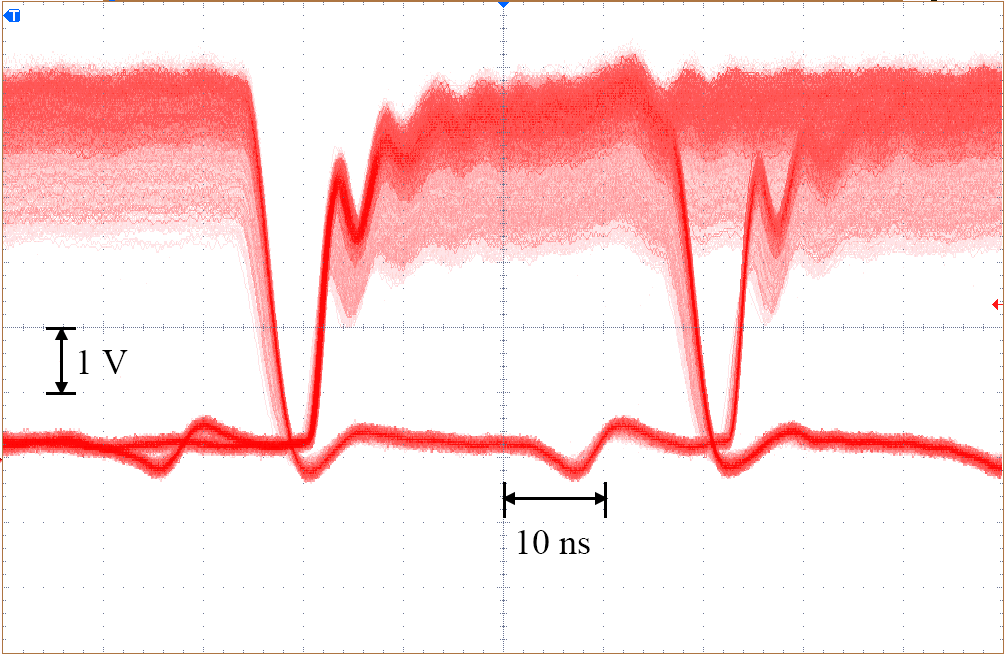
<style>
.page{position:relative;width:1005px;height:655px;background:#ffffff}
.page>*{position:absolute;margin:0}
.t1{font:36px "TimesNewRomanPSMT";color:#000000}
</style>
<div class="page">
<p class="t1" style="left:79px;top:350px;width:49px;height:24px">1 V</p>
<p class="t1" style="left:518px;top:530px;width:72px;height:24px">10 ns</p>
</div>
